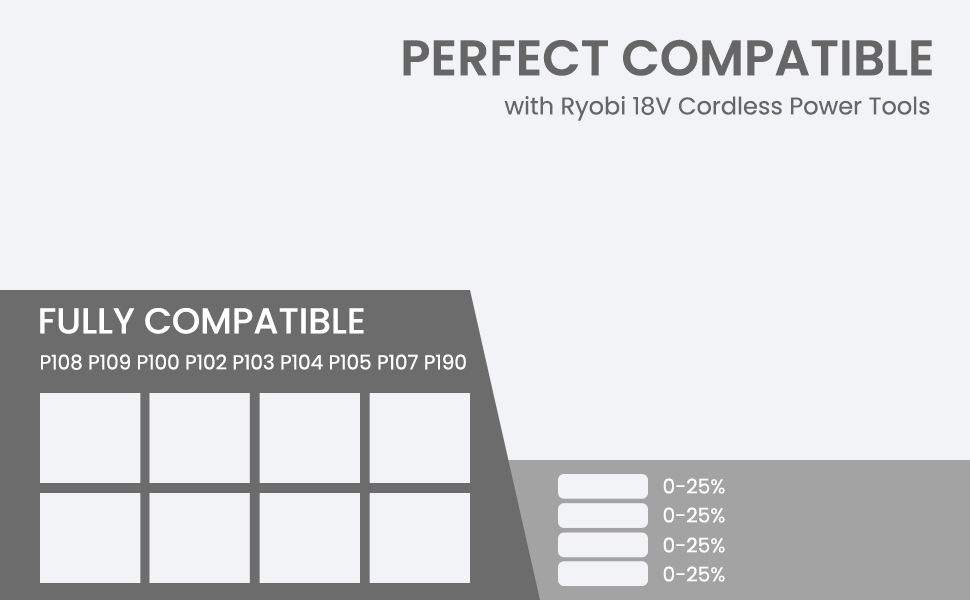
<style>
.page{position:relative;width:970px;height:600px;background:#f2f3f6}
.page>*{position:absolute;margin:0}
.t1{font:50px "Poppins-SemiBold";color:#666666;text-transform:uppercase}
.t2{font:24px "Poppins-Regular";color:#666666}
.t3{font:36px "Poppins-Medium";color:#ffffff;text-transform:uppercase}
.t4{font:20px "Poppins-Regular";color:#ffffff}
</style>
<div class="page">
<p class="t1" style="left:403px;top:39px;width:529px;height:37px">Perfect Compatible</p>
<p class="t2" style="left:504px;top:96px;width:426px;height:25px">with Ryobi 18V Cordless Power Tools</p>
<p class="t3" style="left:40px;top:308px;width:324px;height:26px">Fully Compatible</p>
<p class="t4" style="left:41px;top:354px;width:425px;height:16px">P108 P109 P100 P102 P103 P104 P105 P107 P190</p>
<p class="t4" style="left:663px;top:478px;width:62px;height:16px">0-25%</p>
<p class="t4" style="left:663px;top:507px;width:62px;height:16px">0-25%</p>
<p class="t4" style="left:663px;top:537px;width:62px;height:16px">0-25%</p>
<p class="t4" style="left:663px;top:566px;width:62px;height:16px">0-25%</p>
</div>
